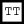
<style>
.page{position:relative;width:24px;height:24px;background:#ffffff}
.page>*{position:absolute;margin:0}
.t1{font:13.2px "CourierNewPSMT";color:#000000}
</style>
<div class="page">
<p class="t1" style="left:5px;top:7px;width:15px;height:8px">TT</p>
</div>
